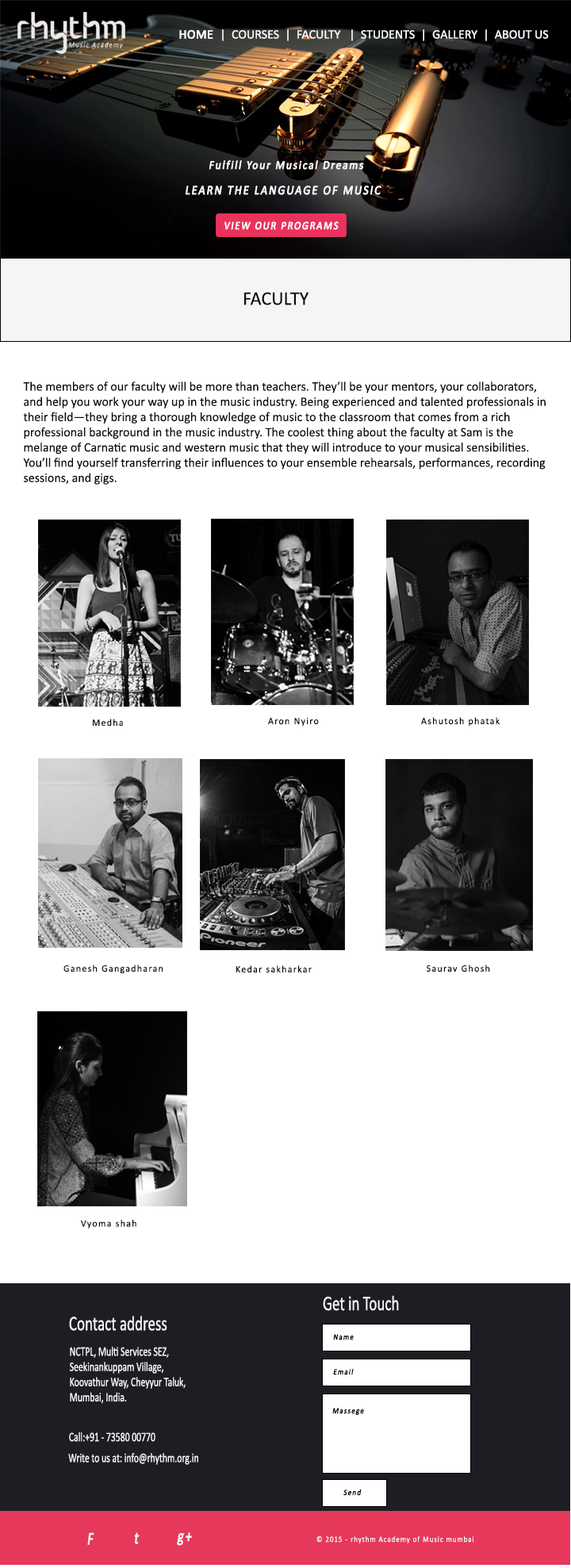
<style>
.page{position:relative;width:571px;height:1568px;background:#ffffff}
.page>*{position:absolute;margin:0}
.t1{font:12.7px "Calibri";color:#fdfdfd}
.t2{font:12.7px "Calibri";color:#fdfdfd;font-weight:bold}
.t3{font:12.1px "Calibri";letter-spacing:0.105em;color:#fdfdfd;font-weight:bold;font-style:italic;scale:0.88 1}
.t4{font:12.9px "Calibri";letter-spacing:0.105em;color:#fdfdfd;font-weight:bold;font-style:italic;scale:0.88 1}
.t5{font:11.3px "Calibri";letter-spacing:0.105em;color:#fefcfc;font-weight:bold;font-style:italic;scale:0.88 1}
.t6{font:19.4px "Calibri";color:#0a0a0a}
.t7{font:12.9px "Calibri";color:#0a0a0a}
.t8{font:9.7px "Calibri";letter-spacing:0.105em;color:#090909}
.t9{font:21px "Calibri";color:#f6f3f4;scale:0.72 1}
.t10{font:8.1px "Calibri";letter-spacing:0.105em;color:#070707;font-weight:bold;font-style:italic;scale:0.88 1}
.t11{font:12.9px "Calibri";color:#f6f3f4;scale:0.72 1}
.t12{font:17.8px "Calibri";letter-spacing:0.105em;color:#f6f3f4;font-weight:bold;font-style:italic;scale:0.72 1}
.t13{font:8.1px "Calibri";letter-spacing:0.105em;color:#f6f3f4;scale:0.88 1}
</style>
<div class="page">
<p class="t1" style="left:179px;top:29px;width:370px;height:12px"><span class="t2">HOME  </span>|  COURSES  |  FACULTY   |  STUDENTS  |  GALLERY  |  ABOUT US</p>
<p class="t3" style="left:209px;top:160px;width:155px;height:10px">Fulfill Your Musical Dreams</p>
<p class="t4" style="left:186px;top:186px;width:195px;height:9px">LEARN THE LANGUAGE OF MUSIC</p>
<p class="t5" style="left:224px;top:221px;width:115px;height:9px">VIEW OUR PROGRAMS</p>
<p class="t6" style="left:244px;top:292px;width:65px;height:13px">FACULTY</p>
<p class="t7" style="left:23px;top:381px;width:523px;height:104px">The members of our faculty will be more than teachers. They’ll be your mentors, your collaborators, <br>and help you work your way up in the music industry. Being experienced and talented professionals in <br>their field—they bring a thorough knowledge of music to the classroom that comes from a rich <br>professional background in the music industry. The coolest thing about the faculty at Sam is the <br>melange of Carnatic music and western music that they will introduce to your musical sensibilities. <br>You’ll find yourself transferring their influences to your ensemble rehearsals, performances, recording <br>sessions, and gigs.</p>
<p class="t8" style="left:93px;top:719px;width:30px;height:7px">Medha</p>
<p class="t8" style="left:268px;top:718px;width:51px;height:8px">Aron Nyiro</p>
<p class="t8" style="left:421px;top:717px;width:79px;height:9px">Ashutosh phatak</p>
<p class="t8" style="left:63px;top:964px;width:100px;height:10px">Ganesh Gangadharan</p>
<p class="t8" style="left:236px;top:965px;width:76px;height:8px">Kedar sakharkar</p>
<p class="t8" style="left:427px;top:964px;width:63px;height:8px">Saurav Ghosh</p>
<p class="t8" style="left:81px;top:1220px;width:55px;height:9px">Vyoma shah</p>
<p class="t9" style="left:323px;top:1295px;width:76px;height:16px">Get in Touch</p>
<p class="t9" style="left:69px;top:1316px;width:98px;height:15px">Contact address</p>
<p class="t10" style="left:333px;top:1334px;width:21px;height:6px">Name</p>
<p class="t11" style="left:70px;top:1347px;width:116px;height:57px">NCTPL, Multi Services SEZ, <br>Seekinankuppam Village, <br>Koovathur Way, Cheyyur Taluk, <br>Mumbai, India.</p>
<p class="t10" style="left:333px;top:1368px;width:21px;height:7px">Email</p>
<p class="t10" style="left:332px;top:1408px;width:32px;height:7px">Massege</p>
<p class="t11" style="left:69px;top:1432px;width:86px;height:10px">Call:+91 - 73580 00770</p>
<p class="t11" style="left:68px;top:1453px;width:130px;height:12px">Write to us at: info@rhythm.org.in</p>
<p class="t10" style="left:343px;top:1489px;width:19px;height:7px">Send</p>
<p class="t12" style="left:87px;top:1532px;width:7px;height:13px">F</p>
<p class="t12" style="left:134px;top:1532px;width:6px;height:12px">t</p>
<p class="t12" style="left:177px;top:1532px;width:15px;height:14px">g+</p>
<p class="t13" style="left:316px;top:1536px;width:157px;height:7px">© 2015 - rhythm Academy of Music mumbai</p>
</div>
